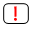
<style>
.page{position:relative;width:32px;height:32px;background:#ffffff}
.page>*{position:absolute;margin:0}
.t1{font:20px "Consolas";color:#ff0000}
</style>
<div class="page">
<p class="t1" style="left:14px;top:6px;width:3px;height:15px">!</p>
</div>
